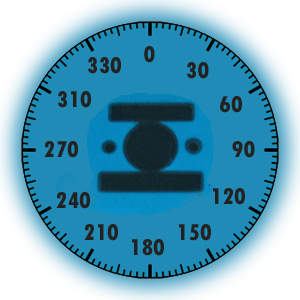
<style>
.page{position:relative;width:300px;height:300px;background:#208bb6}
.page>*{position:absolute;margin:0}
.t1{font:24px "TwCenMT-CondensedExtraBold";color:#232222}
</style>
<div class="page">
<p class="t1" style="left:144px;top:46px;width:11px;height:17px">0</p>
<p class="t1" style="left:88px;top:57px;width:33px;height:17px">330</p>
<p class="t1" style="left:187px;top:62px;width:22px;height:17px">30</p>
<p class="t1" style="left:58px;top:91px;width:33px;height:17px">310</p>
<p class="t1" style="left:220px;top:96px;width:22px;height:17px">60</p>
<p class="t1" style="left:44px;top:141px;width:34px;height:17px">270</p>
<p class="t1" style="left:232px;top:141px;width:23px;height:17px">90</p>
<p class="t1" style="left:56px;top:192px;width:34px;height:17px">240</p>
<p class="t1" style="left:213px;top:188px;width:32px;height:17px">120</p>
<p class="t1" style="left:84px;top:224px;width:34px;height:17px">210</p>
<p class="t1" style="left:179px;top:224px;width:32px;height:17px">150</p>
<p class="t1" style="left:132px;top:239px;width:32px;height:17px">180</p>
</div>
